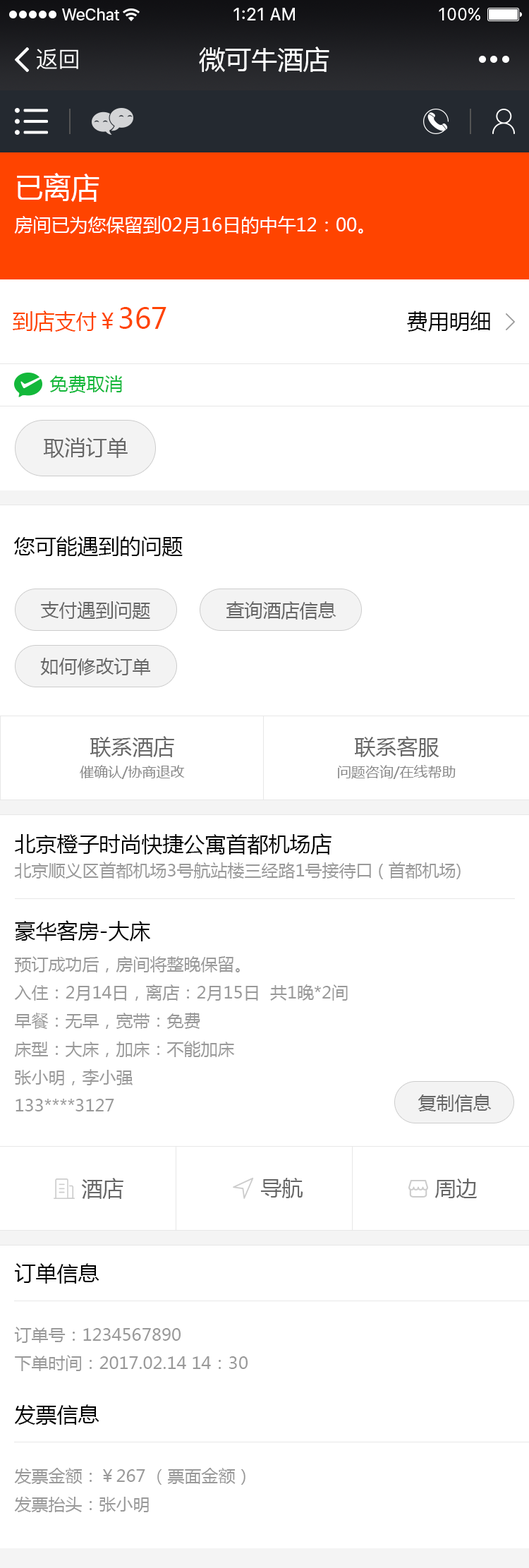
<style>
.page{position:relative;width:529px;height:1568px;background:#ffffff}
.page>*{position:absolute;margin:0}
.t1{font:22.6px "PingFangSC-Regular";color:#ffffff}
.t2{font:26.1px "MicrosoftYaHei";color:#ffffff}
.t3{font:18.3px/25.4px "MicrosoftYaHei";color:#ffffff}
.t4{font:28.2px/42.3px "MicrosoftYaHei";color:#ffffff}
.t5{font:21.2px "MicrosoftYaHei";color:#ff4400}
.t6{font:28.2px "MicrosoftYaHei";color:#ff4400}
.t7{font:21.2px "MicrosoftYaHei";color:#040404}
.t8{font:18.3px "MicrosoftYaHei";color:#13b83a}
.t9{font:21.2px "MicrosoftYaHei";color:#666666}
.t10{font:21.2px "MicrosoftYaHei";color:#000000}
.t11{font:18.3px "MicrosoftYaHei";color:#666666}
.t12{font:14.1px/28.2px "MicrosoftYaHei";color:#888888}
.t13{font:21.2px/28.2px "MicrosoftYaHei";color:#666666}
.t14{font:16.9px/28.2px "MicrosoftYaHei";color:#999999}
.t15{font:21.2px/28.2px "MicrosoftYaHei";color:#000000}
.t16{font:21.2px/35.3px "MicrosoftYaHei";color:#000000}
</style>
<div class="page">
<p class="t1" style="left:37px;top:49px;width:41px;height:21px">返回</p>
<p class="t2" style="left:199px;top:47px;width:131px;height:25px">微可牛酒店</p>
<p class="t3" style="left:14px;top:173px;width:349px;height:61px"><span class="t4">已离店<br></span>房间已为您保留到02月16日的中午12：00。</p>
<p class="t5" style="left:13px;top:307px;width:154px;height:25px">到店支付￥<span class="t6">367</span></p>
<p class="t7" style="left:407px;top:310px;width:83px;height:22px">费用明细</p>
<p class="t8" style="left:49px;top:375px;width:73px;height:18px">免费取消</p>
<p class="t9" style="left:43px;top:438px;width:85px;height:20px">取消订单</p>
<p class="t10" style="left:13px;top:536px;width:170px;height:21px">您可能遇到的问题</p>
<p class="t11" style="left:41px;top:601px;width:109px;height:19px">支付遇到问题</p>
<p class="t11" style="left:226px;top:601px;width:111px;height:19px">查询酒店信息</p>
<p class="t11" style="left:40px;top:658px;width:110px;height:17px">如何修改订单</p>
<p class="t12" style="left:80px;top:736px;width:105px;height:43px;text-align:center"><span class="t13">联系酒店<br></span>催确认/协商退改</p>
<p class="t12" style="left:338px;top:736px;width:118px;height:43px;text-align:center"><span class="t13">联系客服<br></span>问题咨询/在线帮助</p>
<p class="t14" style="left:14px;top:833px;width:447px;height:46px"><span class="t15">北京橙子时尚快捷公寓首都机场店<br></span>北京顺义区首都机场3号航站楼三经路1号接待口 ( 首都机场)</p>
<p class="t14" style="left:14px;top:920px;width:334px;height:191px"><span class="t16">豪华客房-大床<br></span>预订成功后，房间将整晚保留。<br>入住：2月14日，离店：2月15日  共1晚*2间<br>早餐：无早，宽带：免费<br>床型：大床，加床：不能加床<br>张小明，李小强<br>133****3127</p>
<p class="t11" style="left:418px;top:1094px;width:74px;height:18px">复制信息</p>
<p class="t9" style="left:81px;top:1178px;width:42px;height:21px">酒店</p>
<p class="t9" style="left:261px;top:1178px;width:42px;height:20px">导航</p>
<p class="t9" style="left:435px;top:1178px;width:42px;height:20px">周边</p>
<p class="t10" style="left:15px;top:1263px;width:84px;height:21px">订单信息</p>
<p class="t14" style="left:14px;top:1327px;width:234px;height:44px">订单号：1234567890<br>下单时间：2017.02.14 14：30</p>
<p class="t10" style="left:14px;top:1404px;width:85px;height:21px">发票信息</p>
<p class="t14" style="left:14px;top:1468px;width:232px;height:44px">发票金额：￥267 （票面金额）<br>发票抬头：张小明</p>
</div>
